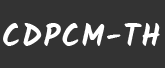
<style>
.page{position:relative;width:165px;height:68px;background:#333333}
.page>*{position:absolute;margin:0}
.t1{font:30px "Kalam-Bold";letter-spacing:0.05em;color:#ffffff}
</style>
<div class="page">
<p class="t1" style="left:3px;top:23px;width:157px;height:23px">CDPCM-TH</p>
</div>
